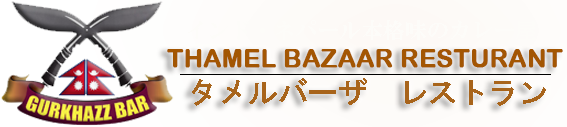
<style>
.page{position:relative;width:567px;height:127px}
.page>*{position:absolute;margin:0}
.t1{font:25px "ArialRoundedMTBold";color:#a35603;font-weight:bold}
.t2{font:30px "HGSGothicE";color:#a8641b}
</style>
<div class="page">
<p class="t1" style="left:167px;top:49px;width:396px;height:19px">THAMEL BAZAAR RESTURANT</p>
<p class="t2" style="left:192px;top:78px;width:354px;height:28px">タメルバーザ　レストラン</p>
</div>
